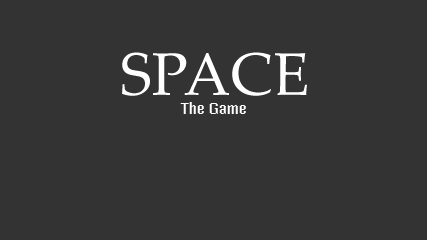
<style>
.page{position:relative;width:427px;height:240px;background:#333333}
.page>*{position:absolute;margin:0}
.t1{font:16px "MisterPixel16pt-Regular";color:#ffffff}
.t2{font:60px "PalatinoLinotype-Roman";color:#ffffff}
</style>
<div class="page">
<p class="t1" style="left:122px;top:52px;width:185px;height:62px;text-align:center"><span class="t2">SPACE<br></span>The Game</p>
</div>
